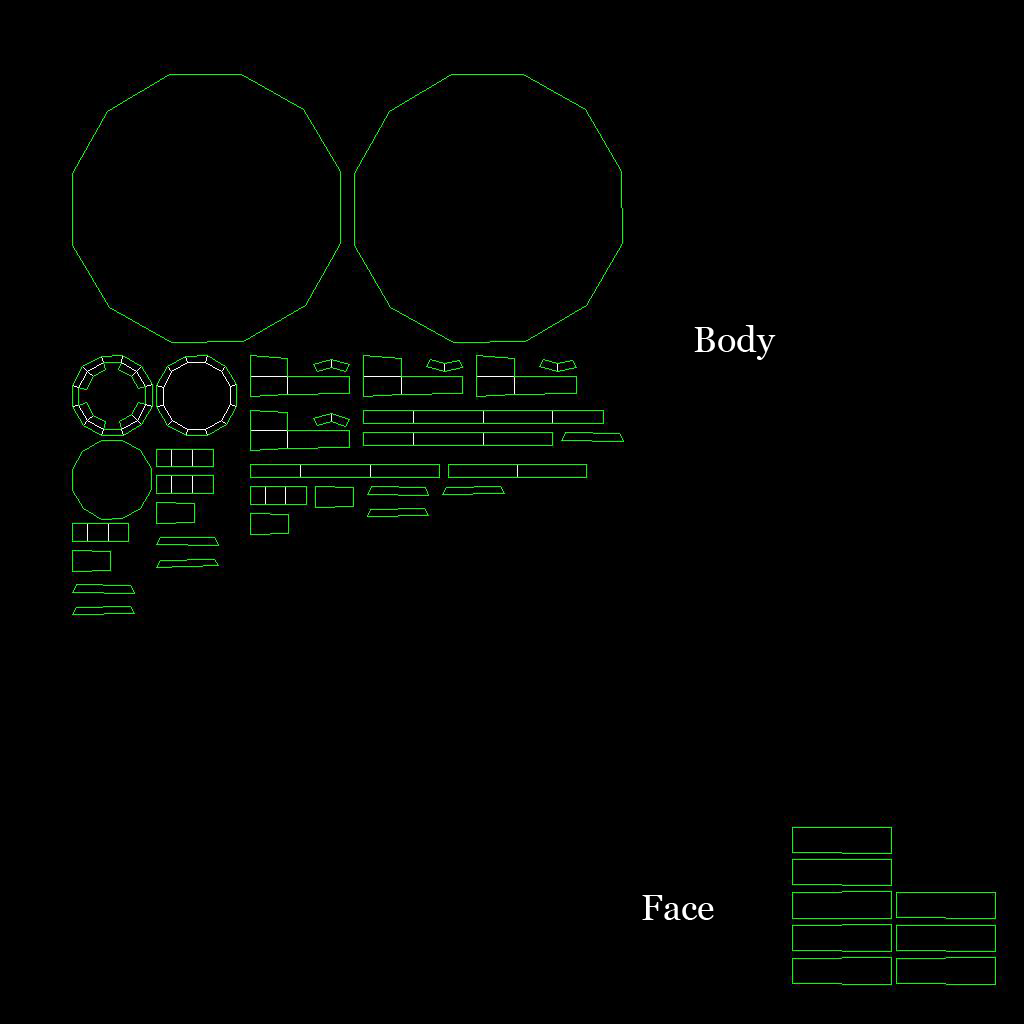
<style>
.page{position:relative;width:1024px;height:1024px;background:#000000}
.page>*{position:absolute;margin:0}
.t1{font:36px "Georgia";color:#ffffff}
</style>
<div class="page">
<p class="t1" style="left:694px;top:325px;width:82px;height:35px">Body</p>
<p class="t1" style="left:642px;top:895px;width:72px;height:25px">Face</p>
</div>
